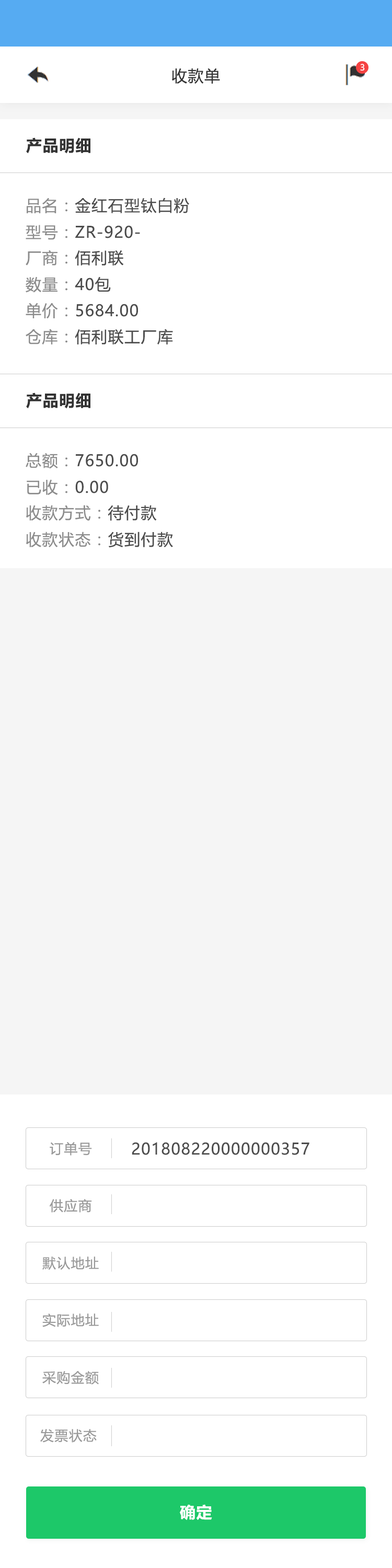
<style>
.page{position:relative;width:392px;height:1568px;background:#ffffff}
.page>*{position:absolute;margin:0}
.t1{font:8.4px "MicrosoftYaHeiUI";color:#ffffff}
.t2{font:15.7px "MicrosoftYaHeiUI";letter-spacing:0.05em;color:#333333}
.t3{font:15.7px "MicrosoftYaHeiUI-Bold";letter-spacing:0.05em;color:#333333}
.t4{font:15.7px "MicrosoftYaHeiUI";letter-spacing:0.05em;color:#4c4c4c}
.t5{font:15.7px "MicrosoftYaHeiUI";letter-spacing:0.05em;color:#8c8c8c}
.t6{font:13.6px "MicrosoftYaHeiUI";letter-spacing:0.05em;color:#999999}
.t7{font:15.7px "MicrosoftYaHeiUI-Bold";letter-spacing:0.05em;color:#ffffff}
</style>
<div class="page">
<p class="t1" style="left:360px;top:64px;width:5px;height:7px">3</p>
<p class="t2" style="left:172px;top:68px;width:48px;height:16px">收款单</p>
<p class="t3" style="left:26px;top:137px;width:64px;height:17px">产品明细</p>
<p class="t4" style="left:27px;top:198px;width:162px;height:15px"><span class="t5">品名：</span>金红石型钛白粉</p>
<p class="t4" style="left:26px;top:225px;width:114px;height:15px"><span class="t5">型号：</span>ZR-920-</p>
<p class="t5" style="left:26px;top:250px;width:98px;height:16px">厂商：<span class="t4">佰利联</span></p>
<p class="t5" style="left:26px;top:276px;width:85px;height:17px">数量：<span class="t4">40包</span></p>
<p class="t4" style="left:26px;top:303px;width:112px;height:16px"><span class="t5">单价：</span>5684.00</p>
<p class="t4" style="left:26px;top:329px;width:147px;height:16px"><span class="t5">仓库：</span>佰利联工厂库</p>
<p class="t3" style="left:26px;top:393px;width:64px;height:16px">产品明细</p>
<p class="t4" style="left:26px;top:453px;width:112px;height:16px"><span class="t5">总额：</span>7650.00</p>
<p class="t4" style="left:27px;top:479px;width:81px;height:16px"><span class="t5">已收：</span>0.00</p>
<p class="t5" style="left:26px;top:505px;width:131px;height:16px">收款方式：<span class="t4">待付款</span></p>
<p class="t5" style="left:26px;top:532px;width:147px;height:16px">收款状态：<span class="t4">货到付款</span></p>
<p class="t6" style="left:50px;top:1142px;width:42px;height:14px">订单号</p>
<p class="t4" style="left:132px;top:1142px;width:177px;height:13px">201808220000000357</p>
<p class="t6" style="left:50px;top:1199px;width:42px;height:14px">供应商</p>
<p class="t6" style="left:42px;top:1256px;width:57px;height:14px">默认地址</p>
<p class="t6" style="left:42px;top:1313px;width:57px;height:14px">实际地址</p>
<p class="t6" style="left:42px;top:1371px;width:57px;height:14px">采购金额</p>
<p class="t6" style="left:40px;top:1429px;width:57px;height:14px">发票状态</p>
<p class="t7" style="left:180px;top:1504px;width:32px;height:16px">确定</p>
</div>
